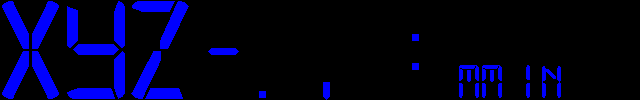
<style>
.page{position:relative;width:640px;height:100px;background:#000000}
.page>*{position:absolute;margin:0}
.t1{font:150px "Digital-7Mono";color:#0000ff}
.t2{font:100px "Digital-7Mono";color:#0000ff}
.t3{font:50px "Digital-7Mono";color:#0000ff}
</style>
<div class="page">
<p class="t1" style="left:2px;top:1px;width:57px;height:98px">X</p>
<p class="t1" style="left:67px;top:1px;width:58px;height:98px">Y</p>
<p class="t1" style="left:131px;top:1px;width:58px;height:98px">Z</p>
<p class="t2" style="left:412px;top:34px;width:7px;height:36px">:</p>
<p class="t2" style="left:208px;top:48px;width:31px;height:7px">-</p>
<p class="t3" style="left:459px;top:65px;width:43px;height:33px">mm</p>
<p class="t3" style="left:526px;top:65px;width:35px;height:33px">in</p>
<p class="t2" style="left:323px;top:82px;width:7px;height:18px">,</p>
</div>
